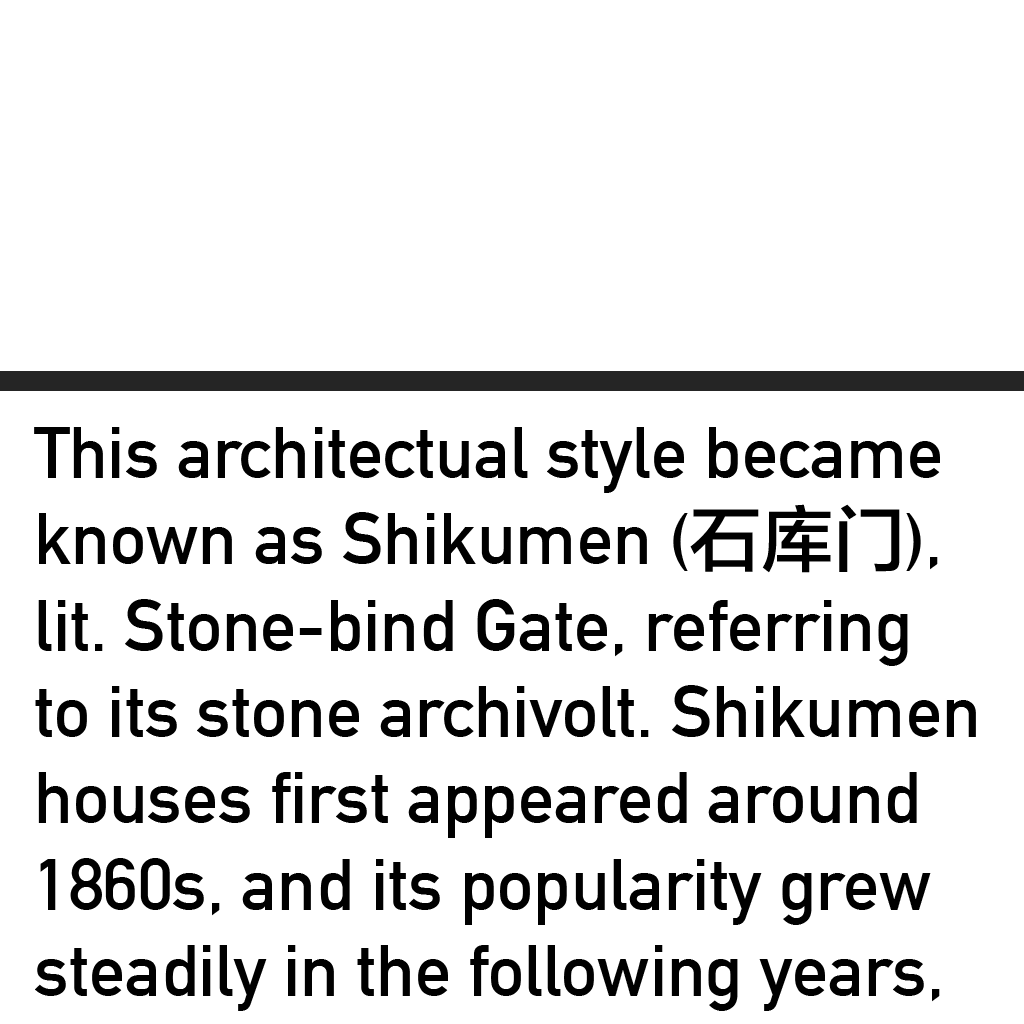
<style>
.page{position:relative;width:1024px;height:1024px;background:#ffffff}
.page>*{position:absolute;margin:0}
.t1{font:72px "DINAlternate-Bold";color:#000000}
.t2{font:72px "FZLTZHK--GBK1-0";color:#000000}
</style>
<div class="page">
<p class="t1" style="left:34px;top:427px;width:942px;height:584px">This architectual style became <br>known as Shikumen (<span class="t2">石库门</span>), <br>lit. Stone-bind Gate, referring<br>to its stone archivolt. Shikumen <br>houses first appeared around <br>1860s, and its popularity grew <br>steadily in the following years,</p>
</div>
